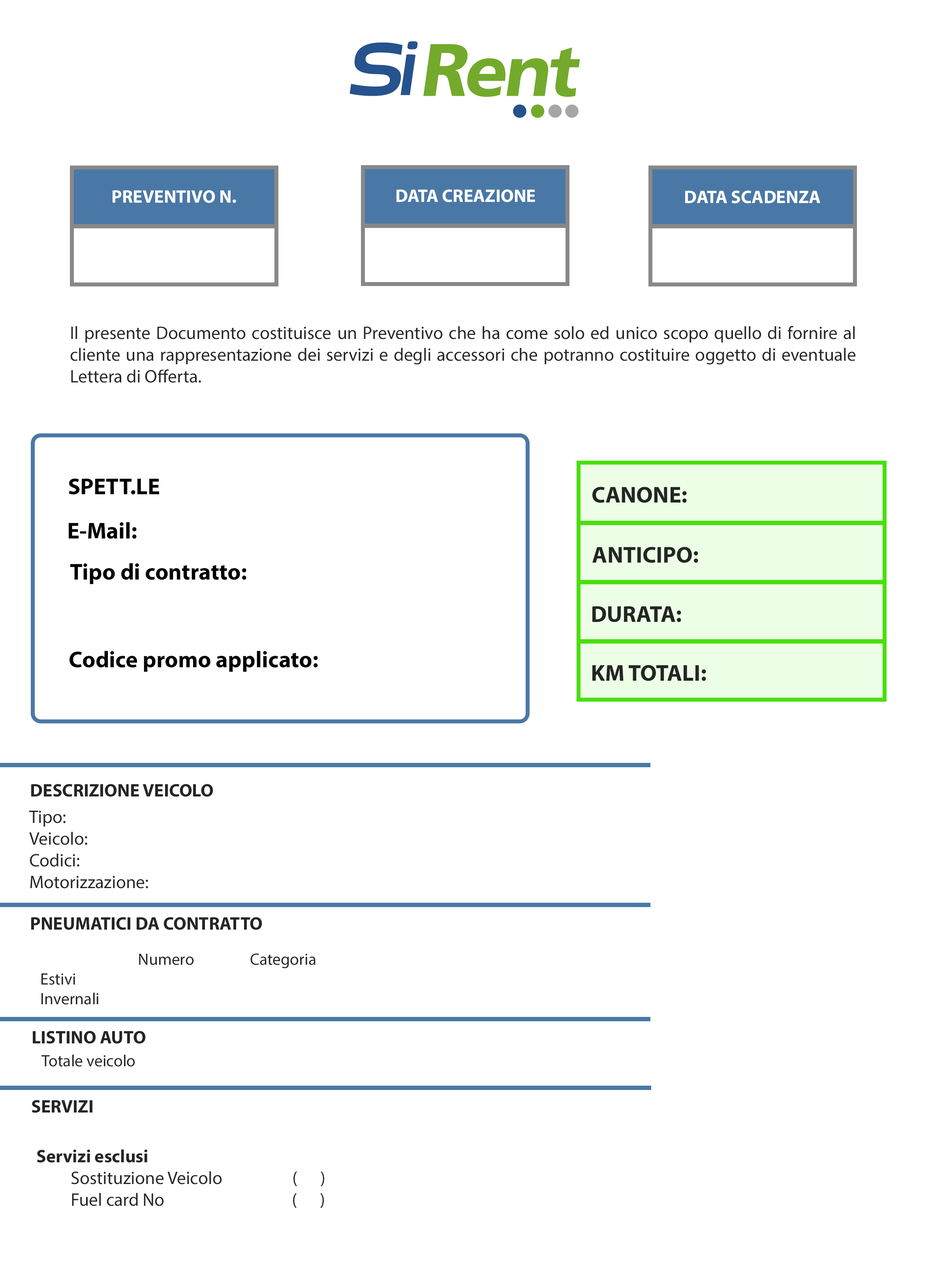
<style>
.page{position:relative;width:930px;height:1282px;background:#ffffff}
.page>*{position:absolute;margin:0}
.t1{font:18.1px "MyriadPro-Bold";color:#ffffff}
.t2{font:18.1px "MyriadPro-Regular";color:#242524}
.t3{font:23px "MyriadPro-Bold";color:#000000}
.t4{font:23px "MyriadPro-Bold";color:#242524}
.t5{font:18.1px "MyriadPro-Bold";color:#242524}
.t6{font:16.5px "MyriadPro-Regular";color:#242524}
</style>
<div class="page">
<p class="t1" style="left:113px;top:190px;width:123px;height:13px">PREVENTIVO N.</p>
<p class="t1" style="left:397px;top:189px;width:138px;height:13px">DATA CREAZIONE</p>
<p class="t1" style="left:685px;top:190px;width:135px;height:13px">DATA SCADENZA</p>
<p class="t2" style="left:70px;top:326px;width:786px;height:57px;text-align:justify">Il presente Documento costituisce un Preventivo che ha come solo ed unico scopo quello di fornire al cliente una rappresentazione dei servizi e degli accessori che potranno costituire oggetto di eventuale Lettera di Offerta.</p>
<p class="t3" style="left:69px;top:478px;width:90px;height:17px">SPETT.LE</p>
<p class="t4" style="left:593px;top:487px;width:94px;height:16px">CANONE:</p>
<p class="t3" style="left:69px;top:522px;width:68px;height:17px">E-Mail:</p>
<p class="t4" style="left:593px;top:547px;width:105px;height:16px">ANTICIPO:</p>
<p class="t3" style="left:70px;top:563px;width:176px;height:21px">Tipo di contratto:</p>
<p class="t4" style="left:593px;top:606px;width:88px;height:16px">DURATA:</p>
<p class="t3" style="left:70px;top:651px;width:248px;height:21px">Codice promo applicato:</p>
<p class="t4" style="left:593px;top:665px;width:113px;height:16px">KM TOTALI:</p>
<p class="t5" style="left:31px;top:784px;width:182px;height:13px">DESCRIZIONE VEICOLO</p>
<p class="t2" style="left:29px;top:811px;width:119px;height:77px">Tipo: <br>Veicolo: <br>Codici: <br>Motorizzazione:</p>
<p class="t5" style="left:31px;top:917px;width:231px;height:13px">PNEUMATICI DA CONTRATTO</p>
<p class="t6" style="left:41px;top:953px;width:275px;height:52px">Numero                Categoria<br>Estivi                                         <br>Invernali</p>
<p class="t5" style="left:33px;top:1031px;width:113px;height:13px">LISTINO AUTO</p>
<p class="t6" style="left:41px;top:1054px;width:94px;height:13px">Totale veicolo</p>
<p class="t5" style="left:32px;top:1100px;width:60px;height:13px">SERVIZI</p>
<p class="t2" style="left:37px;top:1149px;width:287px;height:59px"><span class="t5">Servizi esclusi<br></span>         Sostituzione Veicolo      (      )<br>         Fuel card No                 (      )</p>
</div>
